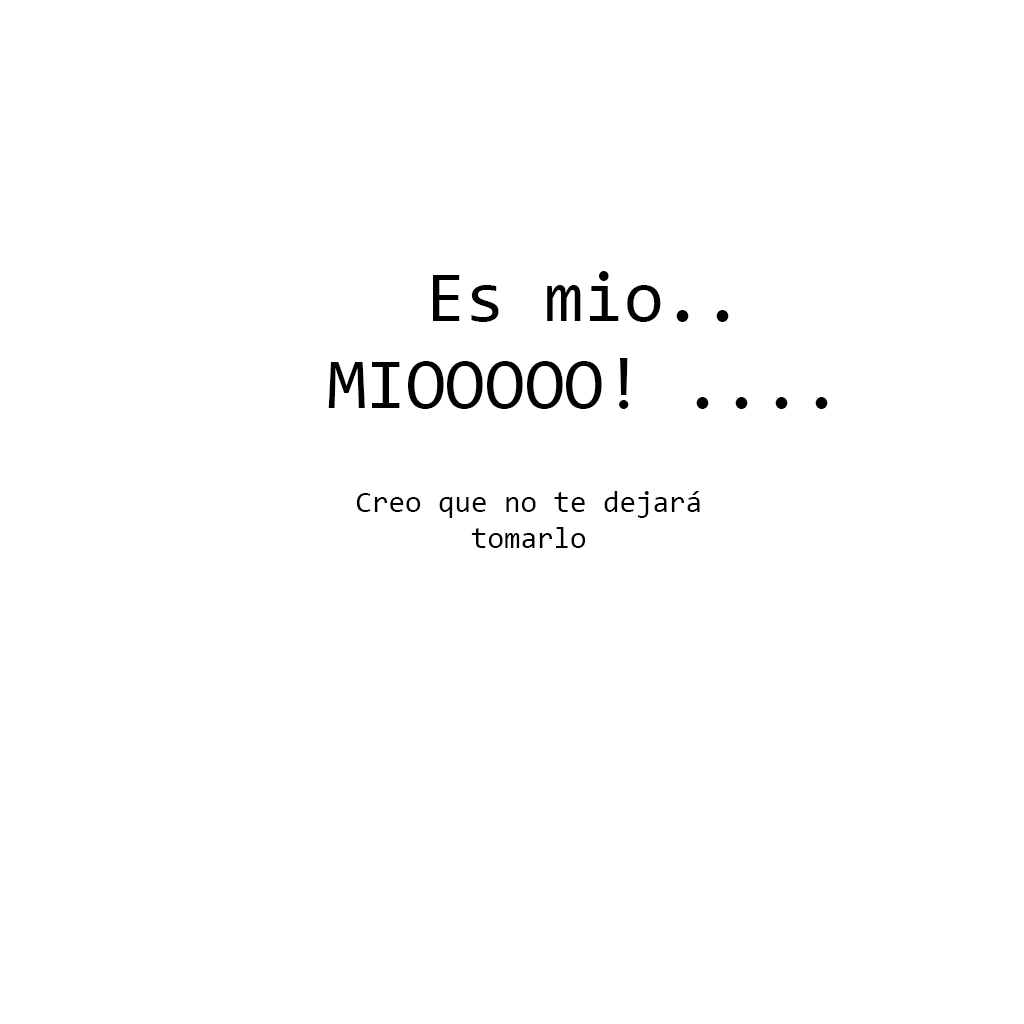
<style>
.page{position:relative;width:1024px;height:1024px;background:#ffffff}
.page>*{position:absolute;margin:0}
.t1{font:72px "Consolas";color:#000000}
.t2{font:30px "Consolas";color:#000000}
</style>
<div class="page">
<p class="t1" style="left:328px;top:271px;width:500px;height:138px;text-align:center">Es mio..<br>MIOOOOO! ....</p>
<p class="t2" style="left:356px;top:491px;width:344px;height:57px;text-align:center">Creo que no te dejará<br>tomarlo</p>
</div>
